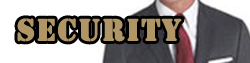
<style>
.page{position:relative;width:250px;height:63px;background:#ffffff}
.page>*{position:absolute;margin:0}
.t1{font:28.3px "StencilStd";letter-spacing:0.05em;color:#b09566;font-weight:bold}
</style>
<div class="page">
<p class="t1" style="left:17px;top:18px;width:165px;height:24px">Security</p>
</div>
